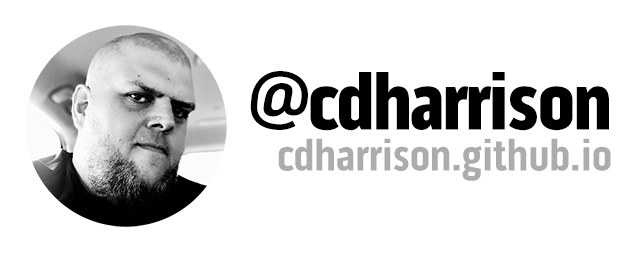
<style>
.page{position:relative;width:640px;height:260px;background:#ffffff}
.page>*{position:absolute;margin:0}
.t1{font:83.3px "PillGothic300mg-Black";letter-spacing:-0.04em;color:#000000}
.t2{font:45.8px "PillGothic300mg-Bold";letter-spacing:-0.02em;color:#acacac}
</style>
<div class="page">
<p class="t1" style="left:250px;top:71px;width:359px;height:60px">@cdharrison</p>
<p class="t2" style="left:278px;top:138px;width:333px;height:43px">cdharrison.github.io</p>
</div>
